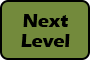
<style>
.page{position:relative;width:90px;height:60px;background:#738a3c}
.page>*{position:absolute;margin:0}
.t1{font:18.5px/20px "ErasITC-Bold";color:#000000}
</style>
<div class="page">
<p class="t1" style="left:21px;top:14px;width:49px;height:33px;text-align:center">Next<br>Level</p>
</div>
